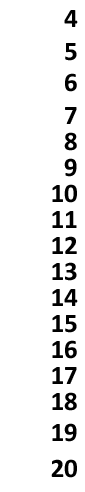
<style>
.page{position:relative;width:85px;height:492px;background:#ffffff}
.page>*{position:absolute;margin:0}
.t1{font:27px/26px "Calibri-Bold";color:#000000}
.t2{font:27px/33px "Calibri-Bold";color:#000000}
.t3{font:27px/31px "Calibri-Bold";color:#000000}
.t4{font:27px/36px "Calibri-Bold";color:#000000}
</style>
<div class="page">
<p class="t1" style="left:51px;top:10px;width:27px;height:468px;text-align:right">4<br><span class="t2">5<br></span><span class="t3">6<br></span><span class="t2">7<br></span>8<br>9<br>10<br>11<br>12<br>13<br>14<br>15<br>16<br>17<br>18<br><span class="t3">19<br></span><span class="t4">20</span></p>
</div>
